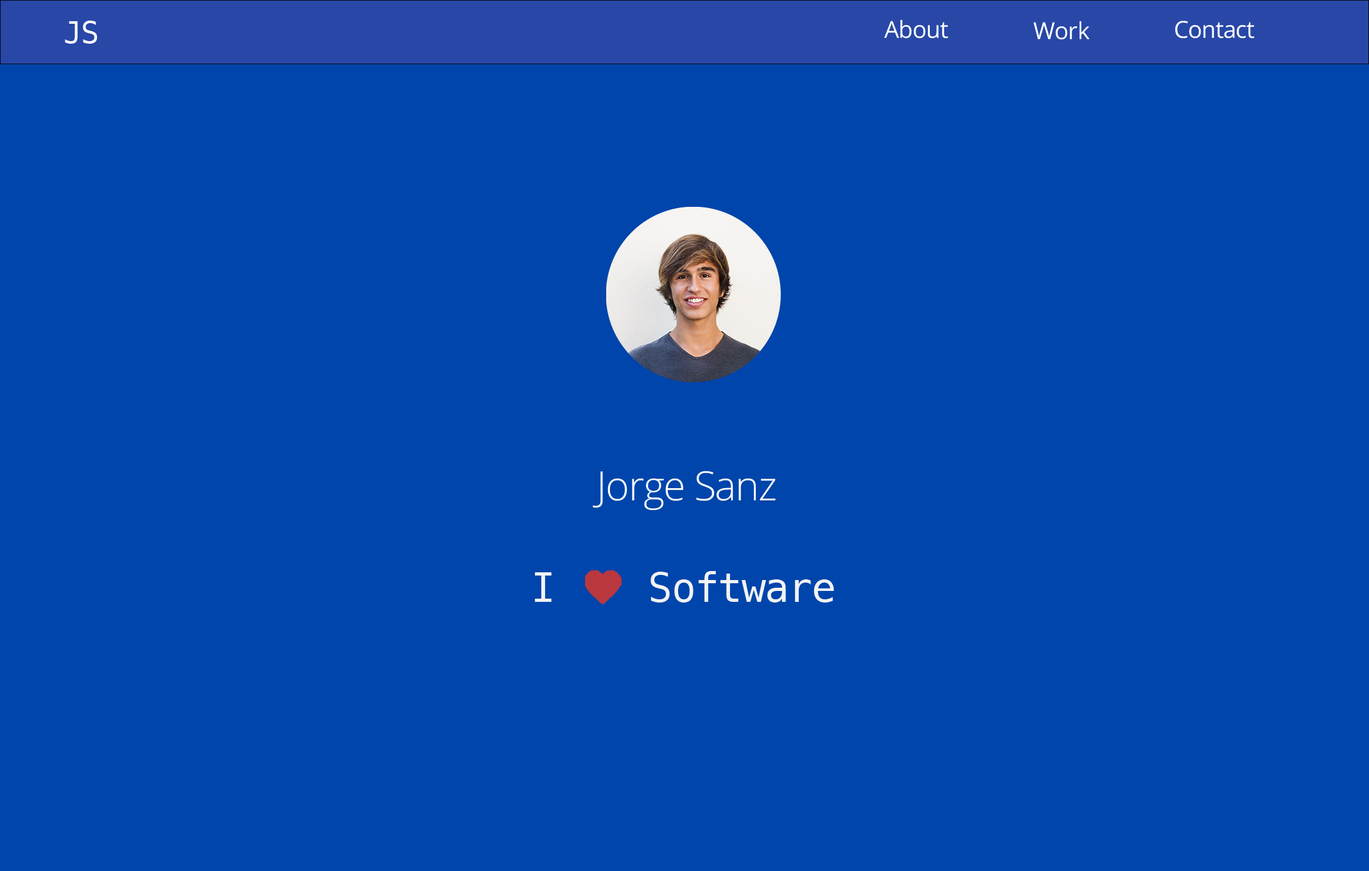
<style>
.page{position:relative;width:1369px;height:871px;background:#0045ab}
.page>*{position:absolute;margin:0}
.t1{font:30.4px "Menlo-Regular";letter-spacing:-0.025em;color:#ffffff}
.t2{font:23.6px "OpenSans";letter-spacing:-0.025em;color:#ffffff}
.t3{font:40.5px "OpenSans-Light";letter-spacing:-0.025em;color:#ffffff}
.t4{font:40.5px "Menlo-Regular";letter-spacing:-0.025em;color:#f3f3f3}
</style>
<div class="page">
<p class="t1" style="left:65px;top:21px;width:33px;height:23px">JS</p>
<p class="t2" style="left:884px;top:20px;width:65px;height:19px">About</p>
<p class="t2" style="left:1033px;top:21px;width:57px;height:19px">Work</p>
<p class="t2" style="left:1175px;top:21px;width:80px;height:18px">Contact</p>
<p class="t3" style="left:593px;top:471px;width:183px;height:40px">Jorge Sanz</p>
<p class="t4" style="left:535px;top:571px;width:299px;height:31px">I    Software</p>
</div>
